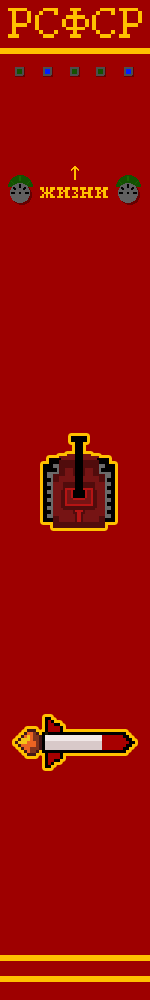
<style>
.page{position:relative;width:150px;height:1000px;background:#9e0000}
.page>*{position:absolute;margin:0}
.t1{font:37.5px "PixelTimes";color:#ffc000}
.t2{font:20.8px "PixelTimes";color:#ffc000}
</style>
<div class="page">
<p class="t1" style="left:8px;top:8px;width:134px;height:30px">РСФСР</p>
<p class="t2" style="left:40px;top:187px;width:68px;height:11px">жизни</p>
</div>
